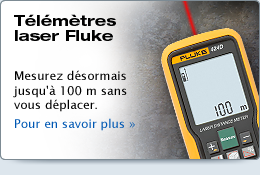
<style>
.page{position:relative;width:260px;height:175px}
.page>*{position:absolute;margin:0}
.t1{font:15px/15.5px "HelveticaNeueLTStd-BdEx";color:#000000}
.t2{font:12px "LucidaSans";color:#000000}
.t3{font:12px/14.4px "LucidaSans";color:#0058b3}
</style>
<div class="page">
<p class="t1" style="left:14px;top:14px;width:102px;height:27px">Télémètres laser Fluke</p>
<p class="t2" style="left:13px;top:70px;width:122px;height:61px">Mesurez désormais <br>jusqu'à 100 m sans vous déplacer. <br><span class="t3">Pour en savoir plus »</span></p>
</div>
